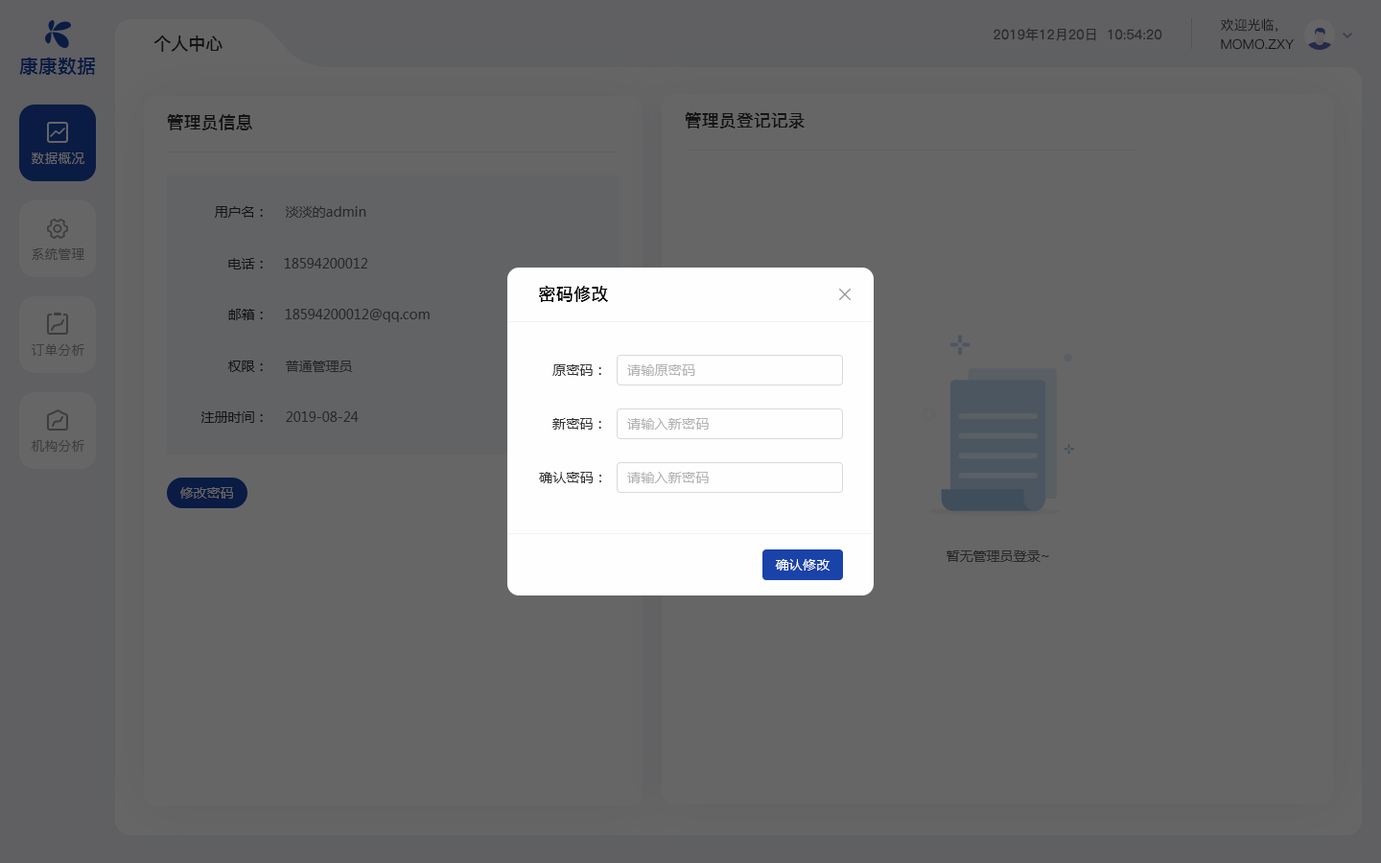
<style>
.page{position:relative;width:1381px;height:863px;background:#666666}
.page>*{position:absolute;margin:0}
.t1{font:13.4px "PingFang-SC-Regular";color:#292929}
.t2{font:13.4px "PingFang-SC-Medium";color:#141414;text-transform:uppercase}
.t3{font:17.3px "PingFang-SC-Bold";color:#141414;text-transform:uppercase}
.t4{font:19.2px "PingFangSC-Medium";color:#0a1b44;text-transform:uppercase}
.t5{font:17.3px "PingFang-SC-Bold";color:#141414}
.t6{font:13.4px "PingFang-SC-Medium";color:#666666;text-transform:uppercase}
.t7{font:13.4px "MicrosoftYaHei";color:#141414}
.t8{font:13.4px "MicrosoftYaHei";color:#292929}
.t9{font:13.4px "PingFang-SC-Medium";color:#3d3d3d;text-transform:uppercase}
.t10{font:17.3px "PingFang-SC-Bold";letter-spacing:0.02em;color:#000000}
.t11{font:13.4px "MicrosoftYaHei";letter-spacing:0.02em;color:#333333}
.t12{font:13.4px "MicrosoftYaHei";letter-spacing:0.02em;color:#b3b3b3}
.t13{font:13.4px "MicrosoftYaHei";color:#666666}
.t14{font:13.4px "MicrosoftYaHei";letter-spacing:0.02em;color:#ffffff}
</style>
<div class="page">
<p class="t1" style="left:994px;top:28px;width:169px;height:13px">2019年12月20日  10:54:20</p>
<p class="t2" style="left:1221px;top:18px;width:57px;height:15px">欢迎光临，</p>
<p class="t3" style="left:153px;top:35px;width:70px;height:17px">个人中心</p>
<p class="t2" style="left:1221px;top:38px;width:73px;height:12px">momo.zxy</p>
<p class="t4" style="left:19px;top:57px;width:76px;height:18px">康康数据</p>
<p class="t5" style="left:685px;top:112px;width:120px;height:17px">管理员登记记录</p>
<p class="t5" style="left:167px;top:114px;width:85px;height:16px">管理员信息</p>
<p class="t6" style="left:32px;top:153px;width:52px;height:11px">数据概况</p>
<p class="t7" style="left:215px;top:206px;width:48px;height:12px">用户名：</p>
<p class="t8" style="left:286px;top:206px;width:80px;height:12px">淡淡的admin</p>
<p class="t9" style="left:32px;top:247px;width:52px;height:13px">系统管理</p>
<p class="t7" style="left:228px;top:258px;width:35px;height:12px">电话：</p>
<p class="t8" style="left:284px;top:258px;width:83px;height:11px">18594200012</p>
<p class="t10" style="left:539px;top:286px;width:69px;height:16px">密码修改</p>
<p class="t7" style="left:228px;top:309px;width:35px;height:11px">邮箱：</p>
<p class="t8" style="left:285px;top:309px;width:145px;height:13px">18594200012@qq.com</p>
<p class="t9" style="left:32px;top:343px;width:52px;height:13px">订单分析</p>
<p class="t7" style="left:228px;top:361px;width:35px;height:11px">权限：</p>
<p class="t8" style="left:286px;top:361px;width:67px;height:11px">普通管理员</p>
<p class="t11" style="left:553px;top:365px;width:48px;height:11px">原密码：</p>
<p class="t12" style="left:627px;top:365px;width:68px;height:11px">请输原密码</p>
<p class="t7" style="left:201px;top:412px;width:62px;height:11px">注册时间：</p>
<p class="t8" style="left:286px;top:412px;width:73px;height:10px">2019-08-24</p>
<p class="t11" style="left:553px;top:418px;width:48px;height:12px">新密码：</p>
<p class="t12" style="left:627px;top:418px;width:82px;height:12px">请输入新密码</p>
<p class="t9" style="left:31px;top:440px;width:53px;height:12px">机构分析</p>
<p class="t11" style="left:539px;top:472px;width:62px;height:11px">确认密码：</p>
<p class="t12" style="left:627px;top:472px;width:82px;height:11px">请输入新密码</p>
<p class="t13" style="left:180px;top:487px;width:53px;height:12px">修改密码</p>
<p class="t8" style="left:947px;top:551px;width:102px;height:11px">暂无管理员登录~</p>
<p class="t14" style="left:775px;top:559px;width:55px;height:12px">确认修改</p>
</div>
